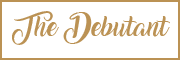
<style>
.page{position:relative;width:180px;height:60px;background:#ffffff}
.page>*{position:absolute;margin:0}
.t1{font:18px "Amarillo";color:#bb9254}
</style>
<div class="page">
<p class="t1" style="left:12px;top:11px;width:158px;height:34px;text-align:center">The Debutant</p>
</div>
